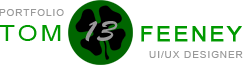
<style>
.page{position:relative;width:245px;height:65px;background:#ffffff}
.page>*{position:absolute;margin:0}
.t1{font:9px "ArialMT";letter-spacing:0.1em;color:#999999;scale:1.1 1}
.t2{font:22px "ArialMT";letter-spacing:0.1em;color:#009900;scale:1.2 1}
.t3{font:30px "BrushScriptStd";color:#999999}
.t4{font:20px "ArialMT";letter-spacing:0.1em;color:#009900;font-weight:bold;scale:1.1 1}
</style>
<div class="page">
<p class="t1" style="left:0px;top:9px;width:64px;height:7px">PORTFOLIO</p>
<p class="t2" style="left:0px;top:25px;width:61px;height:16px">TOM</p>
<p class="t3" style="left:85px;top:21px;width:33px;height:21px">13</p>
<p class="t4" style="left:141px;top:26px;width:101px;height:16px">FEENEY</p>
<p class="t1" style="left:149px;top:51px;width:94px;height:7px">UI/UX DESIGNER</p>
</div>
